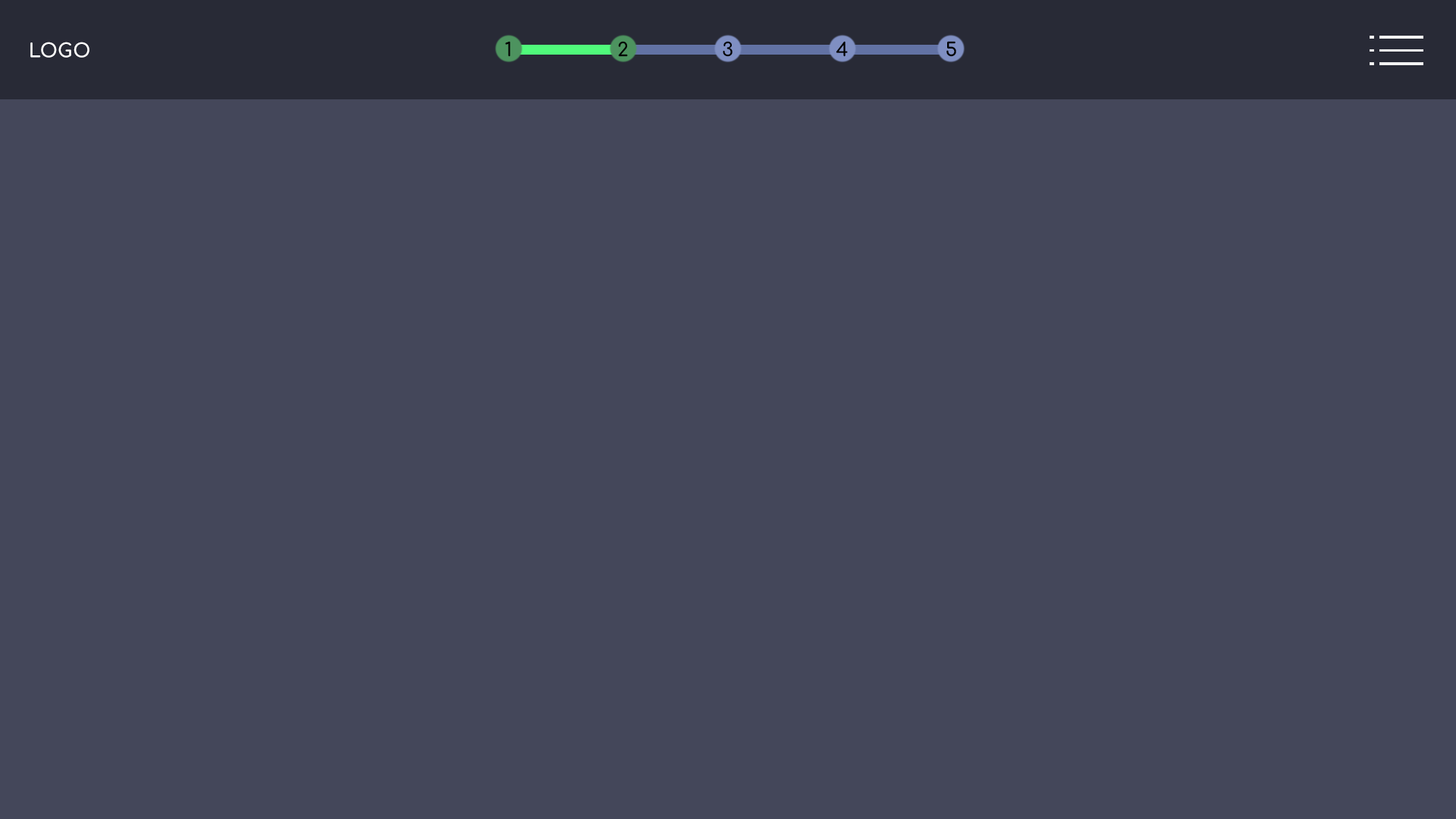
<style>
.page{position:relative;width:1456px;height:819px;background:#44475a}
.page>*{position:absolute;margin:0}
.t1{font:19px "Comfortaa-Bold";letter-spacing:0.03em;color:#ffffff}
.t2{font:19px "Comfortaa-Bold";letter-spacing:0.03em;color:#000000}
</style>
<div class="page">
<p class="t1" style="left:30px;top:42px;width:59px;height:16px">LOGO</p>
<p class="t2" style="left:505px;top:41px;width:5px;height:16px">1</p>
<p class="t2" style="left:618px;top:41px;width:10px;height:16px">2</p>
<p class="t2" style="left:723px;top:41px;width:10px;height:16px">3</p>
<p class="t2" style="left:836px;top:41px;width:12px;height:16px">4</p>
<p class="t2" style="left:946px;top:41px;width:10px;height:16px">5</p>
</div>
